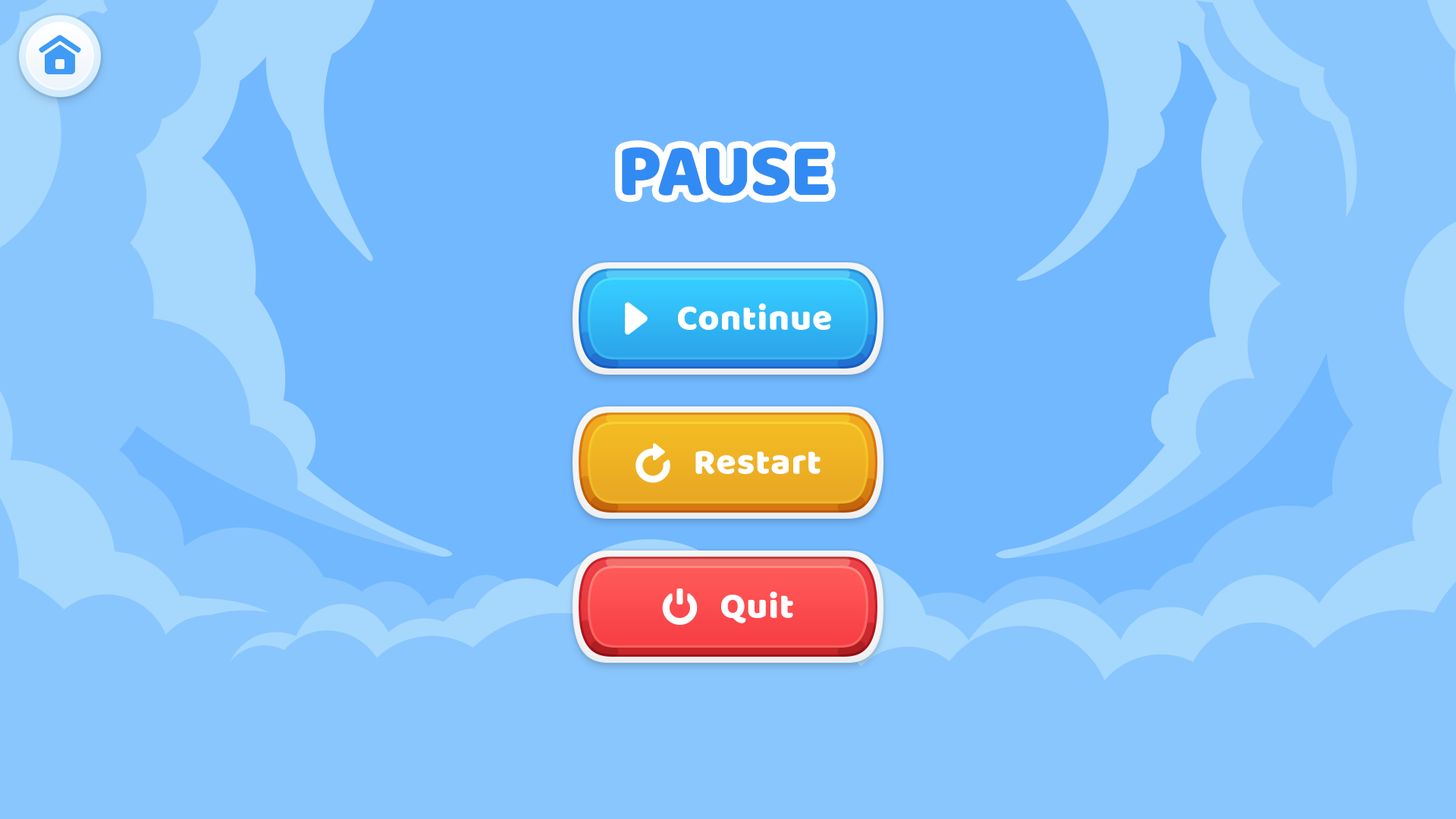
<style>
.page{position:relative;width:1456px;height:819px;background:#89c6fd}
.page>*{position:absolute;margin:0}
.t1{font:75.8px "BalooBhaijaan-Regular";letter-spacing:-0.025em;color:#328bf3;text-transform:uppercase}
.t2{font:36.4px "BalooBhaijaan-Regular";color:#ffffff}
</style>
<div class="page">
<p class="t1" style="left:622px;top:147px;width:207px;height:49px">pause</p>
<p class="t2" style="left:678px;top:303px;width:153px;height:27px">Continue</p>
<p class="t2" style="left:695px;top:450px;width:126px;height:24px">Restart</p>
<p class="t2" style="left:721px;top:591px;width:72px;height:32px">Quit</p>
</div>
